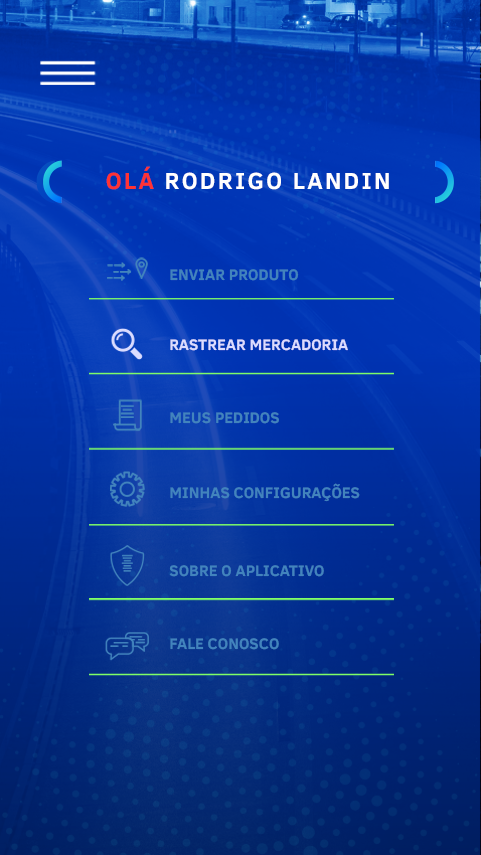
<style>
.page{position:relative;width:481px;height:855px}
.page>*{position:absolute;margin:0}
.t1{font:23.8px "ClearSans-Bold";letter-spacing:0.1em;color:#ffffff}
.t2{font:23.8px "ClearSans-Bold";letter-spacing:0.1em;color:#ff3333}
.t3{font:15.6px "ClearSans-Bold";color:#4284bd}
.t4{font:15.6px "ClearSans-Bold";color:#dbdcff}
</style>
<div class="page">
<p class="t1" style="left:106px;top:166px;width:283px;height:24px"><span class="t2">OLÁ</span> RODRIGO LANDIN</p>
<p class="t3" style="left:170px;top:269px;width:129px;height:12px">ENVIAR PRODUTO</p>
<p class="t4" style="left:170px;top:339px;width:178px;height:12px">RASTREAR MERCADORIA</p>
<p class="t3" style="left:170px;top:412px;width:109px;height:12px">MEUS PEDIDOS</p>
<p class="t3" style="left:170px;top:483px;width:190px;height:19px">MINHAS CONFIGURAÇÕES</p>
<p class="t3" style="left:169px;top:565px;width:155px;height:12px">SOBRE O APLICATIVO</p>
<p class="t3" style="left:170px;top:638px;width:109px;height:12px">FALE CONOSCO</p>
</div>
